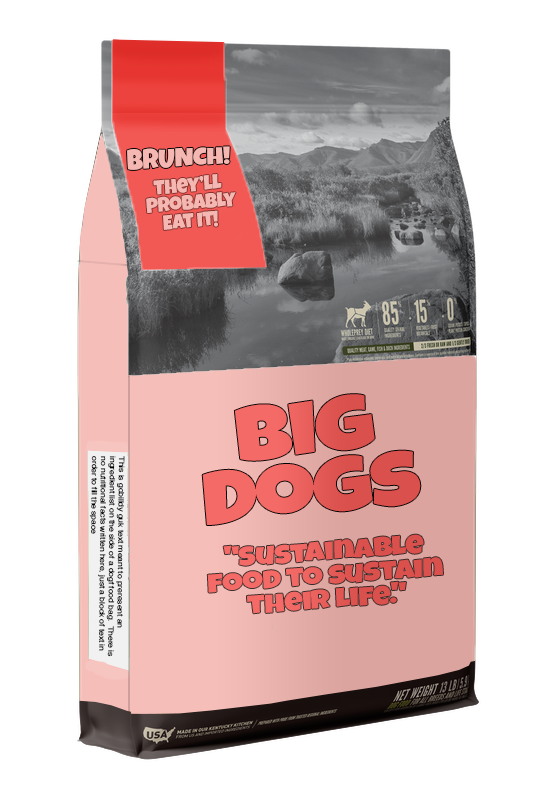
<style>
.page{position:relative;width:556px;height:800px;background:#ffffff}
.page>*{position:absolute;margin:0}
.t1{font:22px "LuckiestGuy-Regular";letter-spacing:-0.02em;color:#f5b7b1;scale:1.23 1}
.t2{font:20.5px/18px "LuckiestGuy-Regular";letter-spacing:-0.02em;color:#f5b7b1}
.t3{font:76.9px/60px "LuckiestGuy-Regular";letter-spacing:-0.02em;color:#f25955;scale:1.22 1}
.t4{font:7.2px "Helvetica";letter-spacing:-0.02em;color:#000000;scale:1.22 1}
.t5{font:26.3px "LuckiestGuy-Regular";letter-spacing:-0.02em;color:#f25955;scale:1.23 1}
</style>
<div class="page">
<p class="t1" style="left:127px;top:146px;width:103px;height:24px;rotate:-3deg">BRUNCH!</p>
<p class="t2" style="left:146px;top:174px;width:90px;height:56px;text-align:center;rotate:-5deg">They’ll<br> Probably Eat It!</p>
<p class="t3" style="left:202px;top:394px;width:219px;height:131px;text-align:center;rotate:-6deg">Big<br>Dogs</p>
<p class="t4" style="left:89px;top:456px;width:36px;height:201px;rotate:91deg">This is gobilldy guk text meant to preresent an ingredient list on the side of a dogf food bag.  There is no nutritional facts written here, just a block of text in order to fill the space</p>
<p class="t5" style="left:207px;top:534px;width:236px;height:80px;rotate:-4deg">"Sustainable food to sustain their life."</p>
</div>
